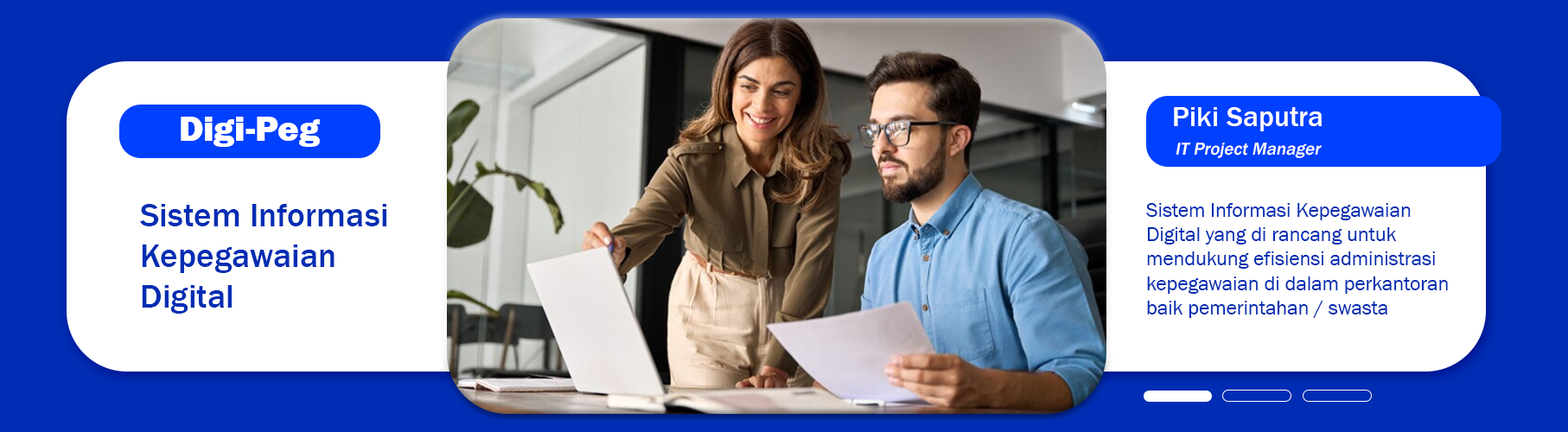
<style>
.page{position:relative;width:1568px;height:432px;background:#ffffff}
.page>*{position:absolute;margin:0}
.t1{font:28.8px "FranklinGothic-Medium";color:#ffffff}
.t2{font:36px "FranklinGothic-Heavy";color:#ffffff}
.t3{font:18px "FranklinGothic-Medium";color:#ffffff;font-style:italic}
.t4{font:34px "FranklinGothic-Medium";color:#002db3}
.t5{font:20.4px "FranklinGothic-Book";color:#002db3}
</style>
<div class="page">
<p class="t1" style="left:1174px;top:107px;width:149px;height:24px">Piki Saputra</p>
<p class="t2" style="left:181px;top:117px;width:139px;height:30px">Digi-Peg</p>
<p class="t3" style="left:1176px;top:143px;width:146px;height:15px">IT Project Manager</p>
<p class="t4" style="left:140px;top:204px;width:246px;height:110px">Sistem Informasi<br>Kepegawaian<br>Digital</p>
<p class="t5" style="left:1146px;top:203px;width:302px;height:115px">Sistem Informasi Kepegawaian<br>Digital yang di rancang untuk<br>mendukung efisiensi administrasi<br>kepegawaian di dalam perkantoran<br>baik pemerintahan / swasta</p>
</div>
